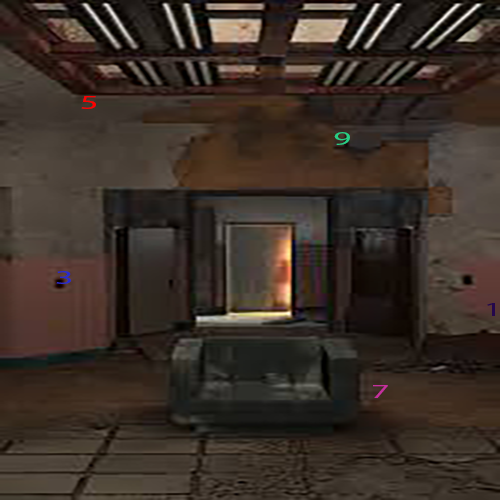
<style>
.page{position:relative;width:500px;height:500px}
.page>*{position:absolute;margin:0}
.t1{font:20px "MyriadPro-Regular";color:#ff0000;scale:1.79 1}
.t2{font:20px "MyriadPro-Regular";color:#28cd85;scale:1.79 1}
.t3{font:20px "MyriadPro-Regular";color:#282ccd;scale:1.79 1}
.t4{font:20px "MyriadPro-Regular";color:#24074c;scale:1.79 1}
.t5{font:20px "MyriadPro-Regular";color:#c5309d;scale:1.79 1}
</style>
<div class="page">
<p class="t1" style="left:81px;top:96px;width:15px;height:13px">5</p>
<p class="t2" style="left:334px;top:132px;width:16px;height:13px">9</p>
<p class="t3" style="left:56px;top:271px;width:15px;height:13px">3</p>
<p class="t4" style="left:487px;top:303px;width:8px;height:13px">1</p>
<p class="t5" style="left:373px;top:385px;width:15px;height:13px">7</p>
</div>
